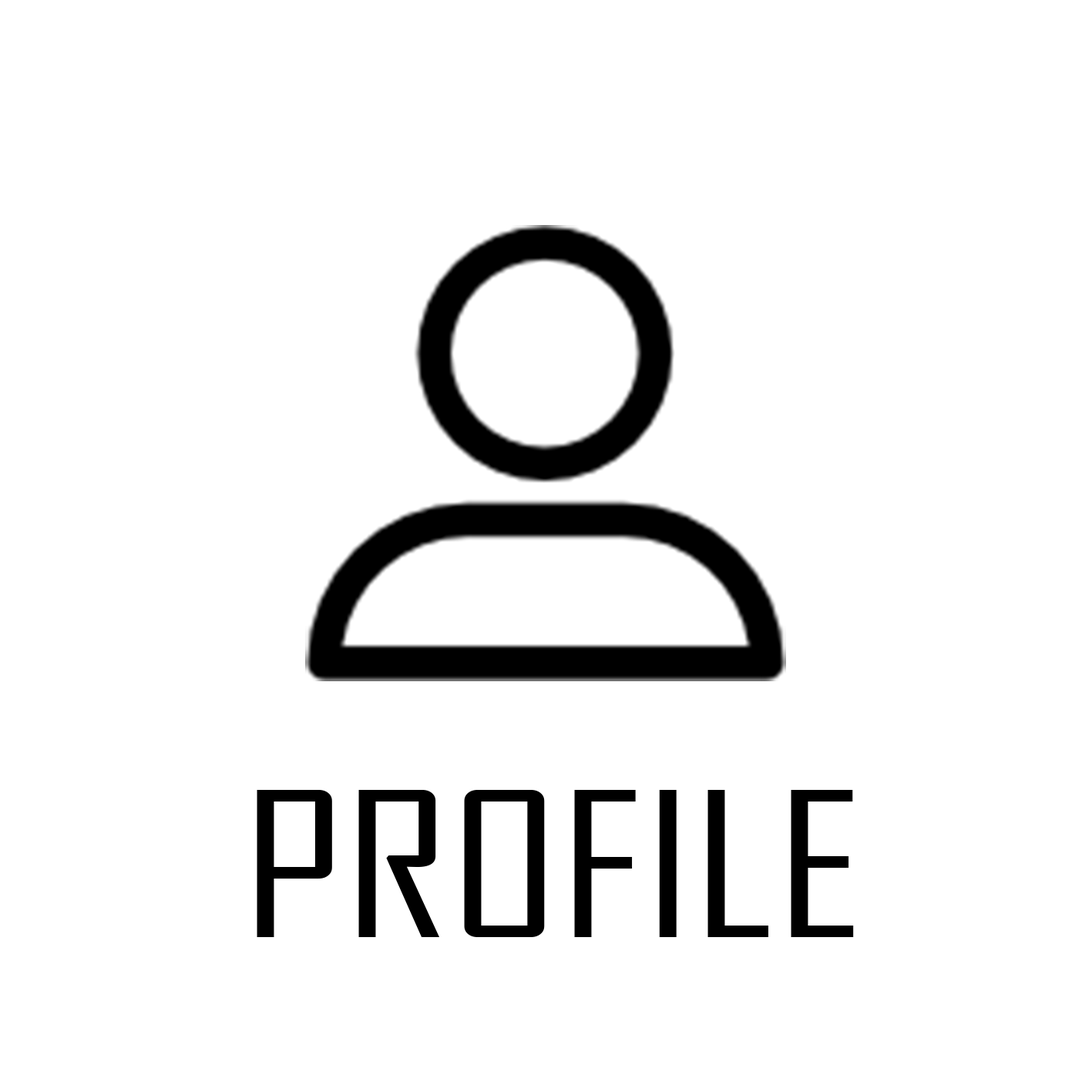
<style>
.page{position:relative;width:1092px;height:1092px;background:#ffffff}
.page>*{position:absolute;margin:0}
.t1{font:192.6px "AgencyFB-Reg";color:#000000;scale:1.29 1}
</style>
<div class="page">
<p class="t1" style="left:257px;top:790px;width:597px;height:147px">PROFILE</p>
</div>
